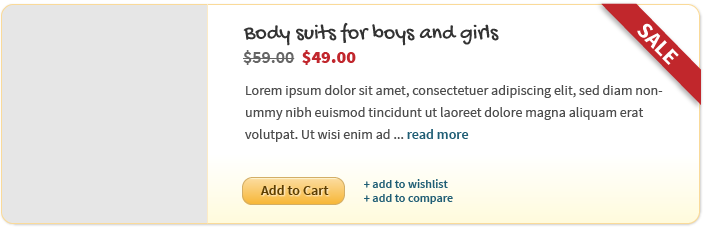
<style>
.page{position:relative;width:704px;height:227px;background:#ffffff}
.page>*{position:absolute;margin:0}
.t1{font:22px "GochiHand-Regular";color:#333333}
.t2{font:18px "SourceSansPro-Semibold";color:#666666}
.t3{font:18px "SourceSansPro-Black";color:#c1272d}
.t4{font:14px/22px "SourceSansPro-Regular";color:#4d4d4d}
.t5{font:14px/22px "SourceSansPro-Semibold";color:#205e75}
.t6{font:14px "SourceSansPro-Semibold";color:#5c3d00}
.t7{font:12px "SourceSansPro-Semibold";color:#205e75}
</style>
<div class="page">
<p class="t1" style="left:243px;top:22px;width:256px;height:24px">Body suits for boys and girls</p>
<p class="t2" style="left:243px;top:50px;width:113px;height:15px">$59.00  <span class="t3">$49.00</span></p>
<p class="t4" style="left:245px;top:85px;width:418px;height:57px">Lorem ipsum dolor sit amet, consectetuer adipiscing elit, sed diam nonummy nibh euismod tincidunt ut laoreet dolore magna aliquam erat volutpat. Ut wisi enim ad ... <span class="t5">read more</span></p>
<p class="t6" style="left:260px;top:185px;width:69px;height:10px">Add to Cart</p>
<p class="t7" style="left:364px;top:179px;width:89px;height:25px">+ add to wishlist<br>+ add to compare</p>
</div>
